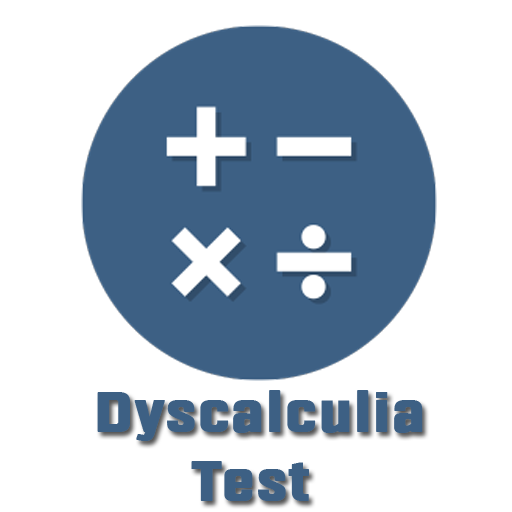
<style>
.page{position:relative;width:512px;height:512px;background:#ffffff}
.page>*{position:absolute;margin:0}
.t1{font:57.1px "Fragua-Bold";color:#3d6084;font-weight:bold;scale:1.17 1}
</style>
<div class="page">
<p class="t1" style="left:97px;top:390px;width:326px;height:111px;text-align:center">Dyscalculia <br>Test</p>
</div>
